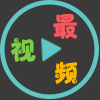
<style>
.page{position:relative;width:100px;height:100px;background:#3a3a3a}
.page>*{position:absolute;margin:0}
.t1{font:27.3px "HYo3gj";letter-spacing:0.1em;color:#fc575e;scale:0.97 1}
.t2{font:26.3px "HYo3gj";letter-spacing:0.1em;color:#7ece45}
.t3{font:24.2px "HYo3gj";letter-spacing:0.1em;color:#fbb600}
</style>
<div class="page">
<p class="t1" style="left:53px;top:14px;width:24px;height:25px">最</p>
<p class="t2" style="left:10px;top:38px;width:26px;height:24px">视</p>
<p class="t3" style="left:55px;top:61px;width:22px;height:23px">频</p>
</div>
